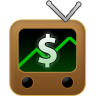
<style>
.page{position:relative;width:96px;height:96px;background:#ffffff}
.page>*{position:absolute;margin:0}
.t1{font:41.6px "MyriadPro-Bold"}
</style>
<div class="page">
<p class="t1" style="left:38px;top:33px;width:19px;height:35px">$</p>
</div>
